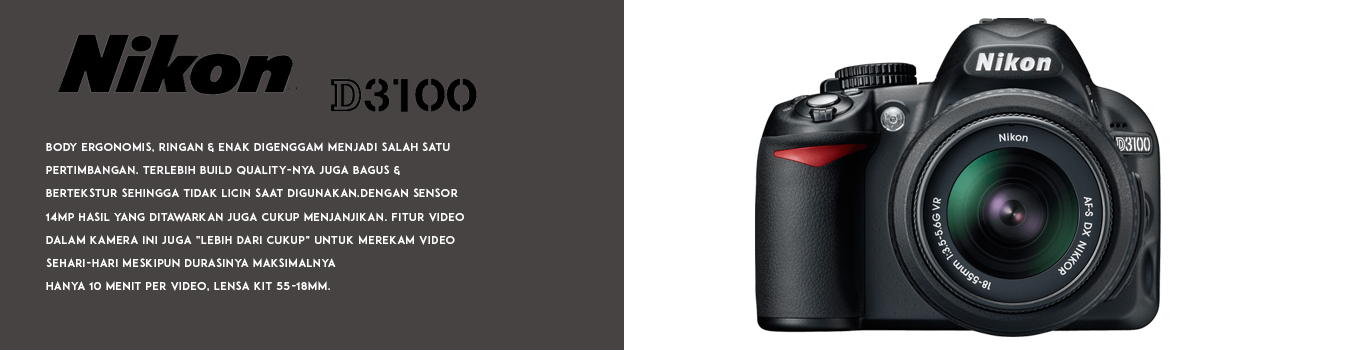
<style>
.page{position:relative;width:1366px;height:350px;background:#474343}
.page>*{position:absolute;margin:0}
.t1{font:11px "ADAM.CGPRO";letter-spacing:0.05em;color:#ffffff}
</style>
<div class="page">
<p class="t1" style="left:45px;top:142px;width:419px;height:149px">Body ergonomis, ringan &amp; enak digenggam menjadi salah satu <br>pertimbangan. Terlebih build quality-nya juga bagus &amp; <br>bertekstur sehingga tidak licin saat digunakan.Dengan sensor <br>14MP hasil yang ditawarkan juga cukup menjanjikan. Fitur video <br>dalam kamera ini juga “lebih dari cukup” untuk merekam video <br>sehari-hari meskipun durasinya maksimalnya <br>hanya 10 menit per video, lensa kit 18-55mm.</p>
</div>
